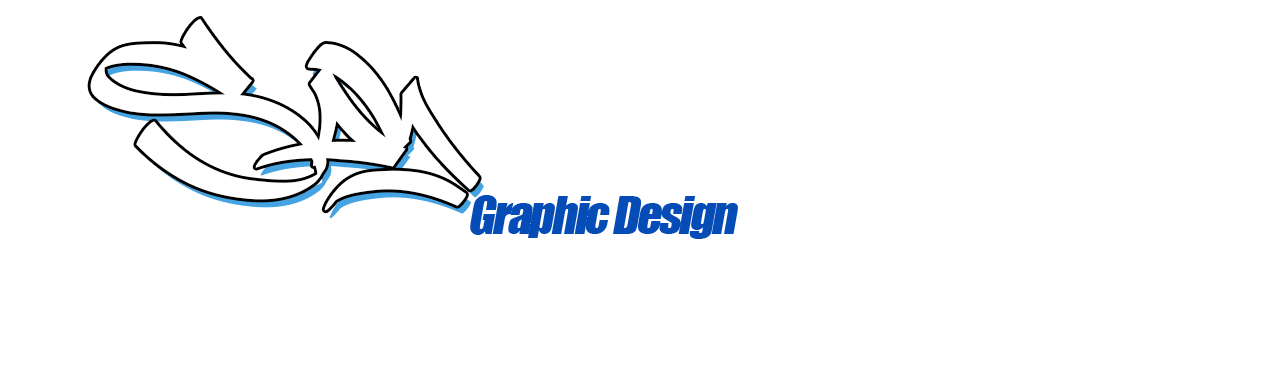
<style>
.page{position:relative;width:1268px;height:369px;background:#ffffff}
.page>*{position:absolute;margin:0}
.t1{font:48px "Impact";letter-spacing:-0.051em;color:#064cb6;font-style:italic}
</style>
<div class="page">
<p class="t1" style="left:470px;top:195px;width:268px;height:44px">Graphic Design</p>
</div>
